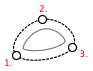
<style>
.page{position:relative;width:93px;height:71px;background:#ffffff}
.page>*{position:absolute;margin:0}
.t1{font:9px "LucidaGrande";color:#ff0000}
.t2{font:9px "LucidaGrande"}
</style>
<div class="page">
<p class="t1" style="left:39px;top:5px;width:8px;height:7px">2.</p>
<p class="t2" style="left:80px;top:50px;width:8px;height:7px">3.</p>
<p class="t2" style="left:5px;top:59px;width:7px;height:7px">1.</p>
</div>
